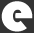
<style>
.page{position:relative;width:34px;height:33px;background:#ffffff}
.page>*{position:absolute;margin:0}
.t1{font:60px "Bauhaus93";letter-spacing:0.02em;color:#ffffff}
</style>
<div class="page">
<p class="t1" style="left:1px;top:1px;width:32px;height:31px">e</p>
</div>
